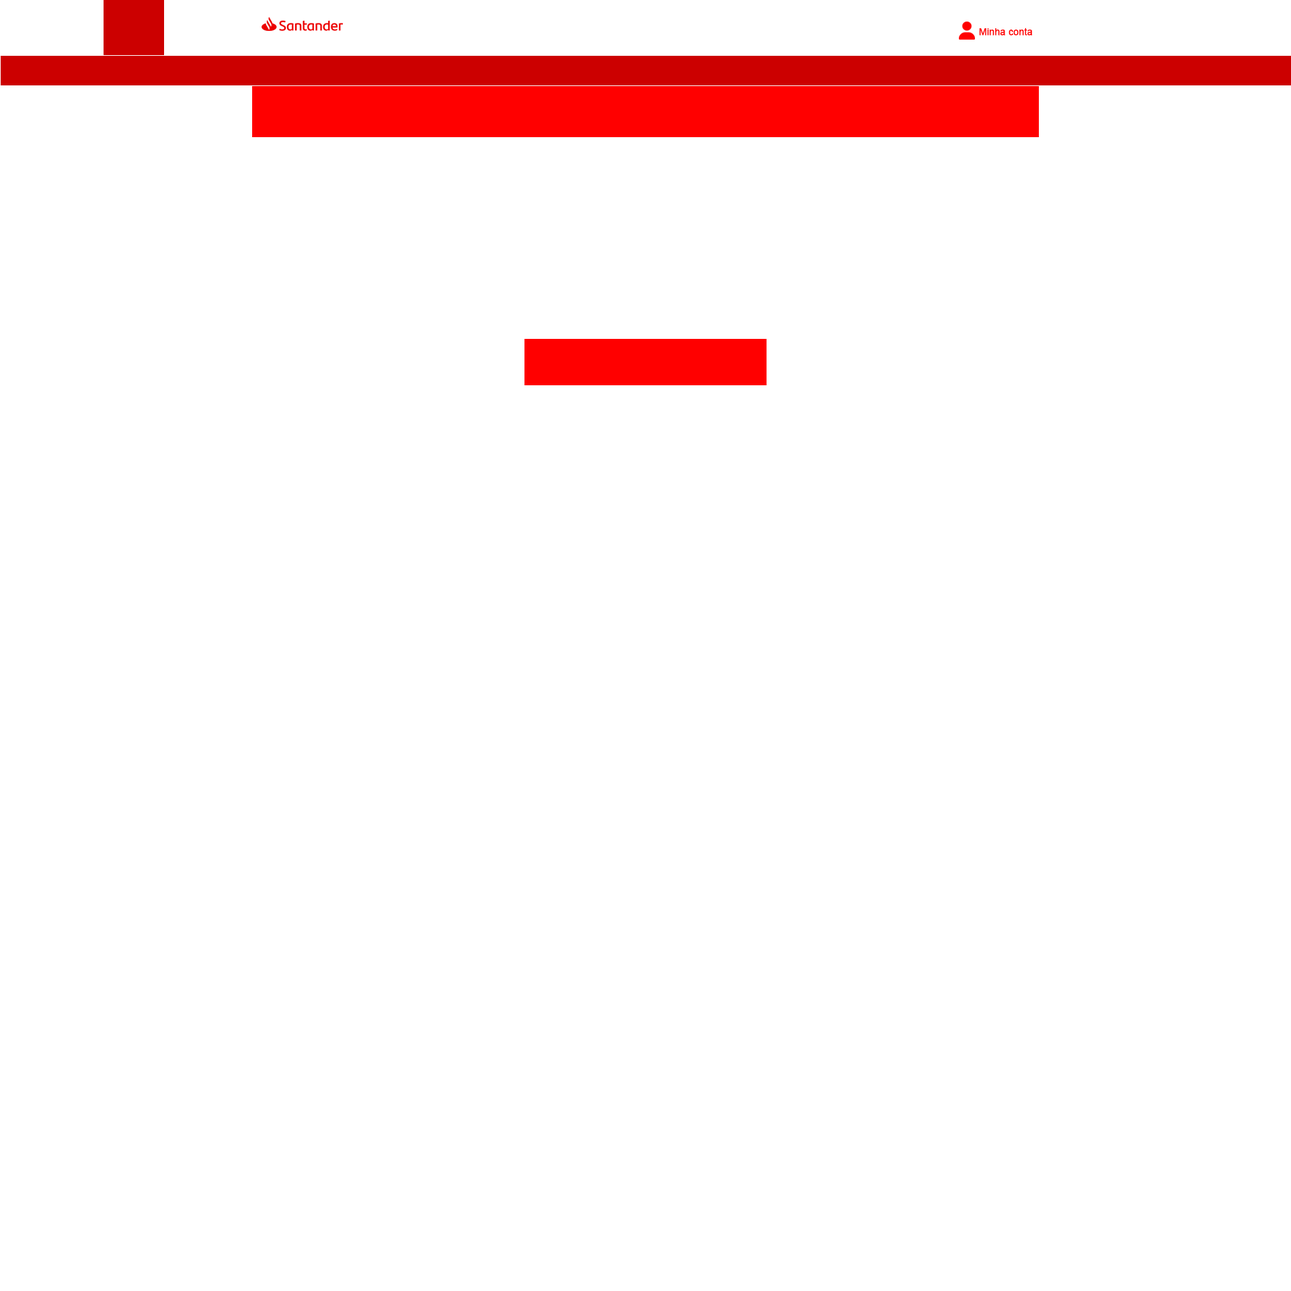
<style>
.page{position:relative;width:1291px;height:1291px;background:#ffffff}
.page>*{position:absolute;margin:0}
.t1{font:9px "ArialMT";color:#ff0000;font-weight:bold;scale:1.04 1}
</style>
<div class="page">
<p class="t1" style="left:979px;top:28px;width:53px;height:8px">Minha conta</p>
</div>
